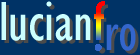
<style>
.page{position:relative;width:140px;height:55px;background:#003366}
.page>*{position:absolute;margin:0}
.t1{font:56.7px "GillSansMT-Condensed";color:#ccffff}
.t2{font:56.7px "GillSansMT-Condensed";color:#3366cc}
.t3{font:56.7px "GillSansMT-Condensed"}
</style>
<div class="page">
<p class="t1" style="left:1px;top:1px;width:104px;height:40px">lucianf</p>
<p class="t2" style="left:95px;top:24px;width:41px;height:27px">.ro</p>
<p class="t3" style="left:99px;top:27px;width:40px;height:27px">.ro</p>
</div>
